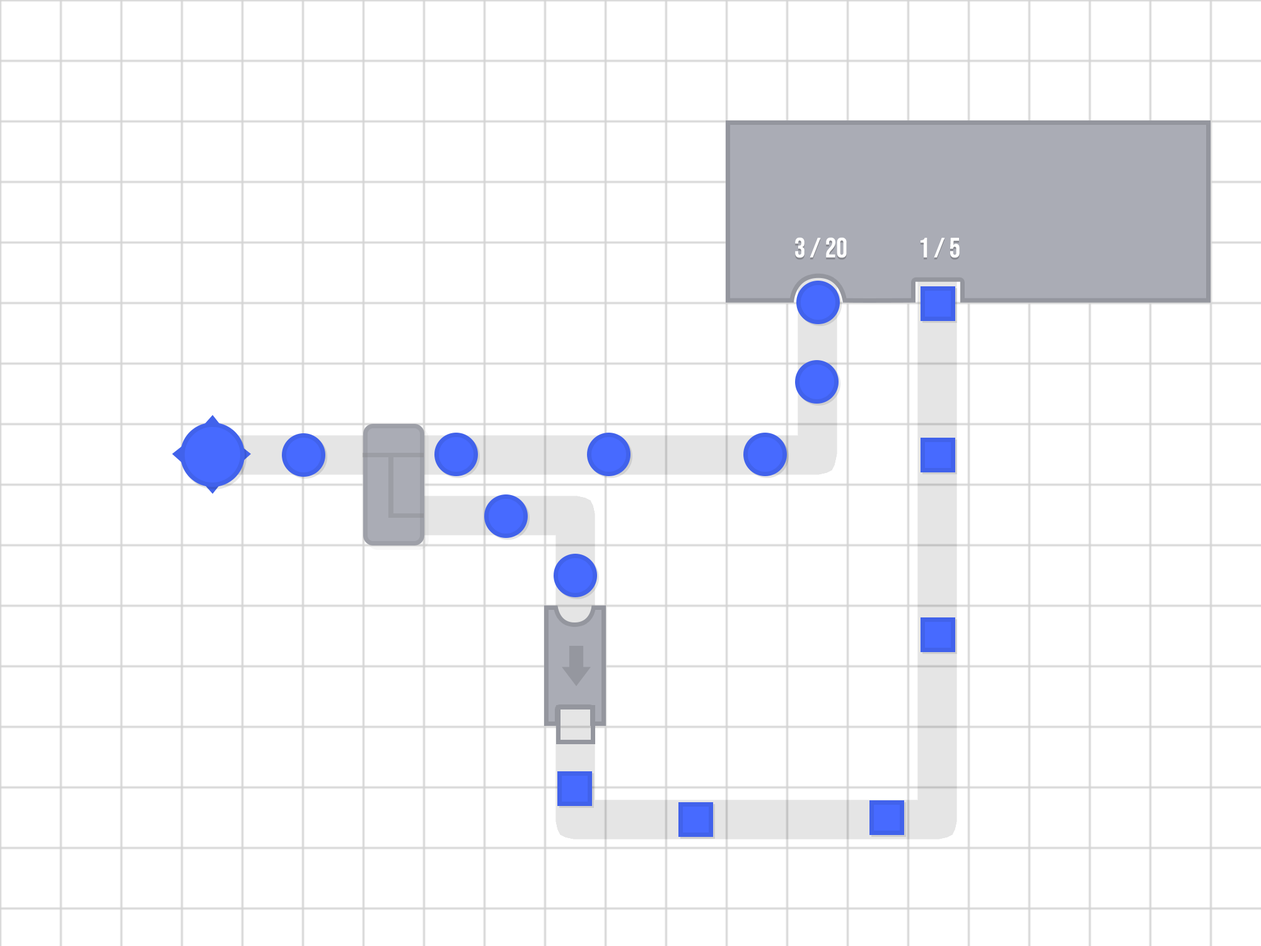
<style>
.page{position:relative;width:1261px;height:946px;background:#ffffff}
.page>*{position:absolute;margin:0}
.t1{font:27.7px "BebasNeue-Regular";color:#ffffff}
</style>
<div class="page">
<p class="t1" style="left:795px;top:237px;width:52px;height:21px">3 / 20</p>
<p class="t1" style="left:920px;top:238px;width:40px;height:20px">1 / 5</p>
</div>
